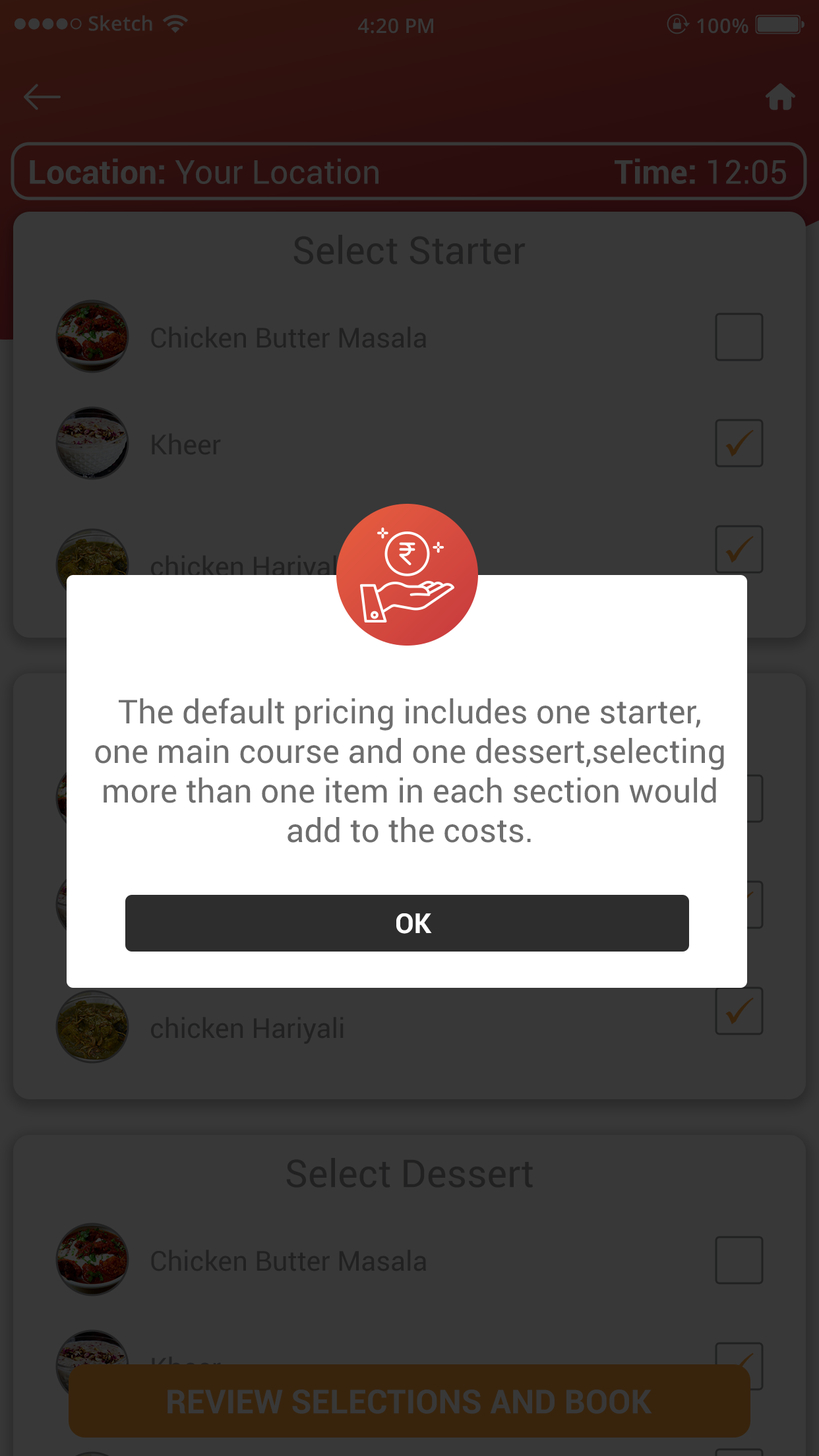
<style>
.page{position:relative;width:819px;height:1456px;background:#383838}
.page>*{position:absolute;margin:0}
.t1{font:20.1px "OpenSans-Semibold";color:#383838}
.t2{font:33px "Roboto-Regular";color:#383838}
.t3{font:33px "Roboto-Bold";color:#383838}
.t4{font:38.5px "Roboto-Regular";color:#212122}
.t5{font:27.5px "Roboto-Regular";color:#212122}
.t6{font:33px "Roboto-Regular";color:#6e6e6e}
.t7{font:27.5px "Roboto-Bold";color:#ffffff}
.t8{font:27.5px "Roboto-Regular";color:#38240d}
</style>
<div class="page">
<p class="t1" style="left:88px;top:15px;width:64px;height:16px">Sketch</p>
<p class="t1" style="left:358px;top:18px;width:75px;height:16px">4:20 PM</p>
<p class="t1" style="left:697px;top:18px;width:51px;height:16px">100%</p>
<p class="t2" style="left:30px;top:158px;width:349px;height:26px"><span class="t3">Location: </span>Your Location</p>
<p class="t3" style="left:615px;top:158px;width:171px;height:26px">Time: <span class="t2">12:05</span></p>
<p class="t4" style="left:293px;top:235px;width:233px;height:29px">Select Starter</p>
<p class="t5" style="left:151px;top:326px;width:275px;height:22px">Chicken Butter Masala</p>
<p class="t5" style="left:152px;top:433px;width:69px;height:22px">Kheer</p>
<p class="t6" style="left:95px;top:698px;width:629px;height:145px;text-align:center">The default pricing includes one starter,<br>one main course and one dessert,selecting<br>more than one item in each section would<br>add to the costs.</p>
<p class="t7" style="left:396px;top:913px;width:36px;height:21px">OK</p>
<p class="t5" style="left:151px;top:1017px;width:193px;height:27px">chicken Hariyali</p>
<p class="t4" style="left:286px;top:1158px;width:247px;height:30px">Select Dessert</p>
<p class="t5" style="left:151px;top:1250px;width:275px;height:21px">Chicken Butter Masala</p>
<p class="t8" style="left:152px;top:1356px;width:69px;height:22px">Kheer</p>
<p class="t3" style="left:167px;top:1389px;width:485px;height:25px">REVIEW SELECTIONS AND BOOK</p>
</div>
